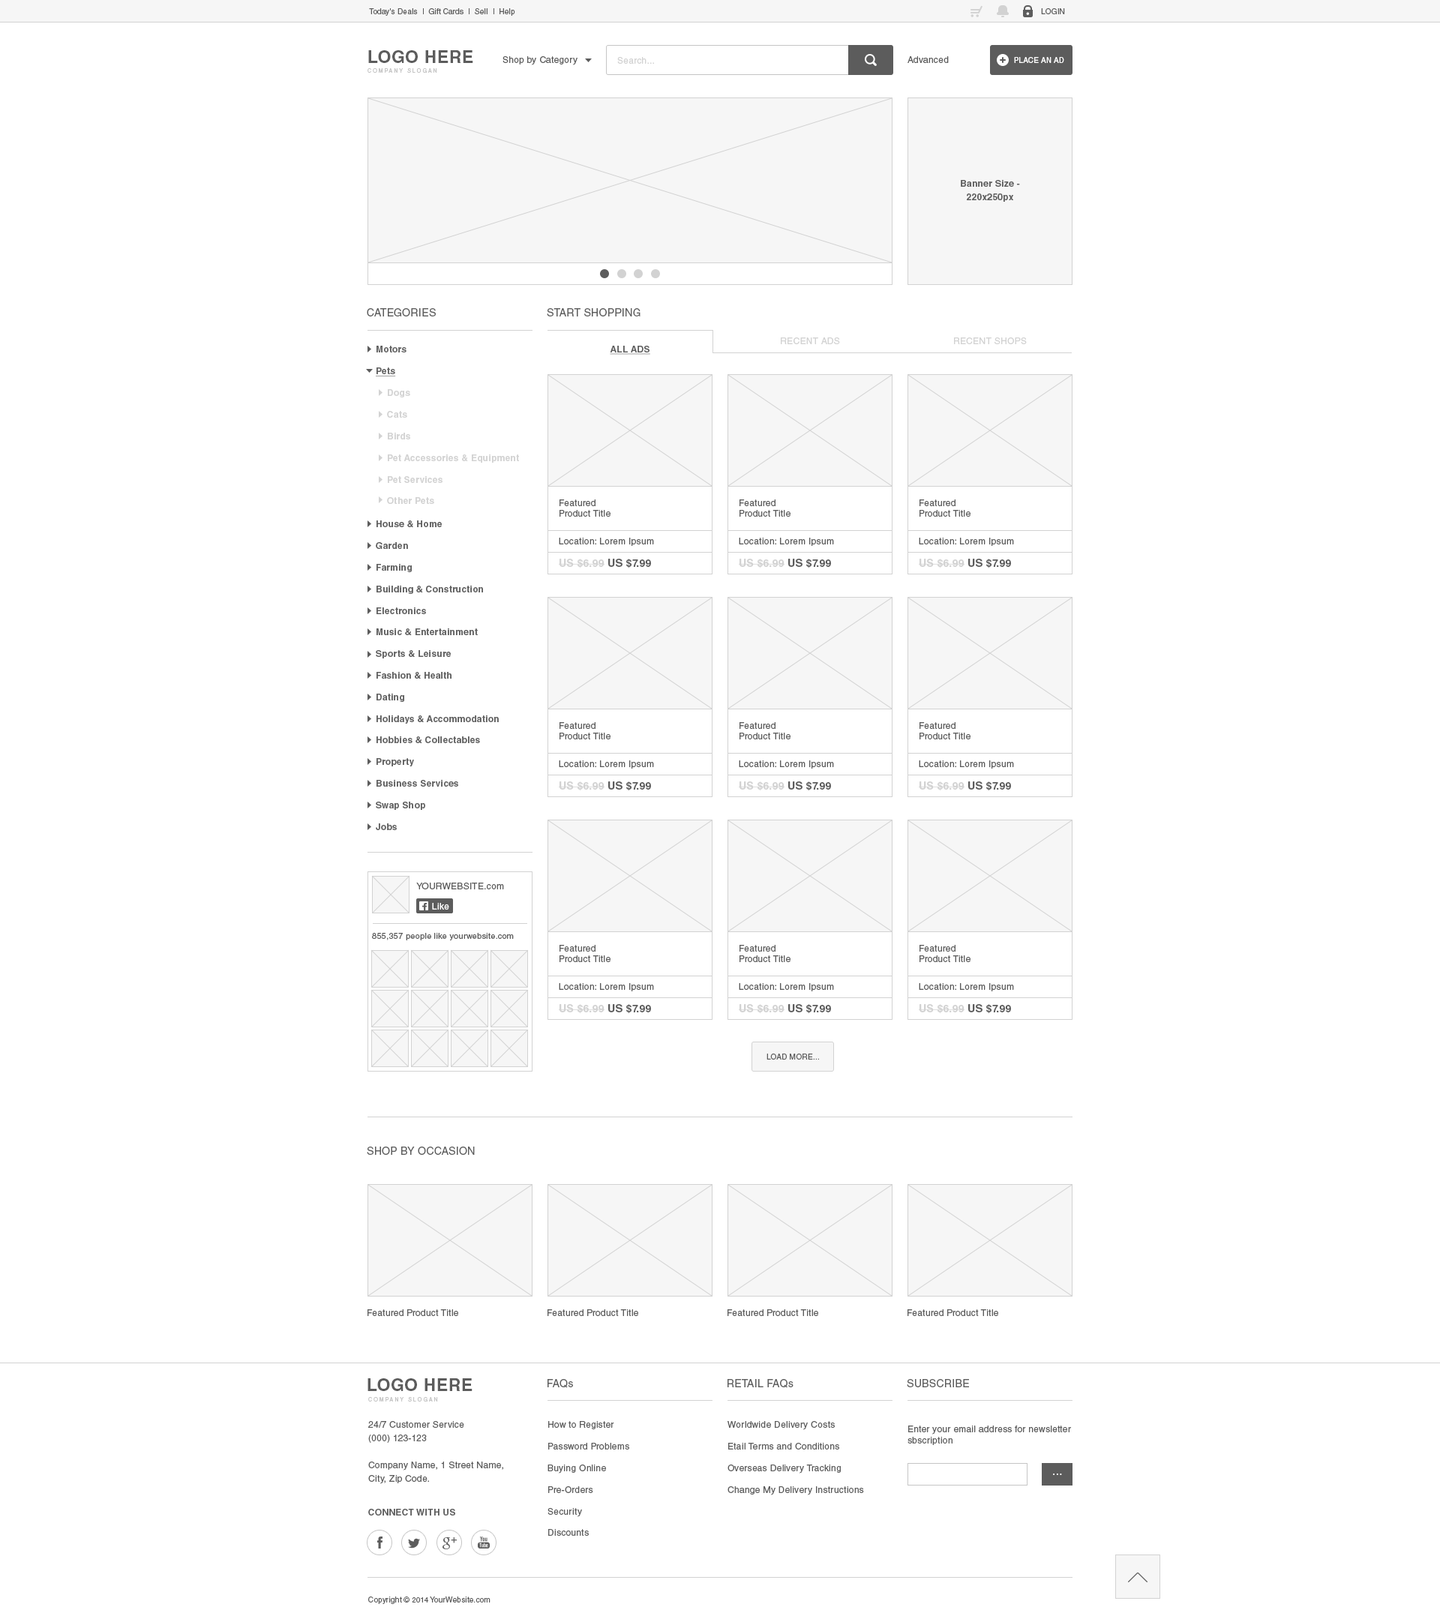
<style>
.page{position:relative;width:1440px;height:1622px;background:#ffffff}
.page>*{position:absolute;margin:0}
.t1{font:7.5px "HelveticaLTStd-Roman";letter-spacing:0.024em;color:#5c5c5c}
.t2{font:7.5px "HelveticaLTStd-Roman";letter-spacing:0.024em;color:#5c5c5c;text-transform:uppercase}
.t3{font:17.2px "HelveticaLTStd-Bold";letter-spacing:0.024em;color:#5c5c5c;text-transform:uppercase}
.t4{font:9px "HelveticaLTStd-Roman";letter-spacing:0.024em;color:#5c5c5c}
.t5{font:9px "HelveticaLTStd-Roman";letter-spacing:0.024em;color:#d2d2d2}
.t6{font:7.5px "HelveticaLTStd-Roman";letter-spacing:0.024em;color:#ffffff;text-transform:uppercase}
.t7{font:5.2px "HelveticaLTStd-Roman";letter-spacing:0.3em;color:#c5c5c5;text-transform:uppercase}
.t8{font:9px/13.5px "HelveticaLTStd-Bold";letter-spacing:0.024em;color:#5c5c5c}
.t9{font:10.5px "HelveticaLTStd-Roman";letter-spacing:0.024em;color:#5c5c5c;text-transform:uppercase}
.t10{font:9px "HelveticaLTStd-Roman";letter-spacing:0.024em;color:#d2d2d2;text-transform:uppercase}
.t11{font:9px "HelveticaLTStd-Bold";letter-spacing:0.024em;color:#5c5c5c}
.t12{font:9px "HelveticaLTStd-Bold";letter-spacing:0.024em;color:#5c5c5c;text-decoration:underline}
.t13{font:9px "HelveticaLTStd-Bold";letter-spacing:0.024em;color:#5c5c5c;text-transform:uppercase;text-decoration:underline}
.t14{font:9px "HelveticaLTStd-Bold";letter-spacing:0.024em;color:#d2d2d2}
.t15{font:10.5px "HelveticaLTStd-Bold";letter-spacing:0.024em;color:#d2d2d2}
.t16{font:10.5px "HelveticaLTStd-Bold";letter-spacing:0.024em;color:#5c5c5c}
.t17{font:9px "HelveticaLTStd-Roman";letter-spacing:0.024em;color:#5c5c5c;text-transform:uppercase}
.t18{font:9px "HelveticaLTStd-Roman";letter-spacing:0.024em;color:#ffffff}
.t19{font:8.2px "HelveticaLTStd-Roman";letter-spacing:0.024em;color:#5c5c5c}
.t20{font:10.5px "HelveticaLTStd-Roman";letter-spacing:0.024em;color:#5c5c5c}
.t21{font:9px/13.5px "HelveticaLTStd-Roman";letter-spacing:0.024em;color:#5c5c5c}
.t22{font:12px "OpenSans";letter-spacing:0.024em;color:#ffffff;text-transform:uppercase}
.t23{font:9px "HelveticaLTStd-Bold";letter-spacing:0.024em;color:#5c5c5c;text-transform:uppercase}
</style>
<div class="page">
<p class="t1" style="left:369px;top:8px;width:146px;height:8px">Today's Deals  |  Gift Cards  |  Sell  |  Help</p>
<p class="t2" style="left:1041px;top:8px;width:24px;height:6px">login</p>
<p class="t3" style="left:368px;top:50px;width:105px;height:13px">Logo Here</p>
<p class="t4" style="left:502px;top:56px;width:76px;height:9px">Shop by Category</p>
<p class="t5" style="left:617px;top:57px;width:37px;height:7px">Search...</p>
<p class="t4" style="left:908px;top:56px;width:41px;height:7px">Advanced</p>
<p class="t6" style="left:1014px;top:57px;width:50px;height:6px">Place an ad</p>
<p class="t7" style="left:368px;top:68px;width:69px;height:5px">Company Slogan</p>
<p class="t8" style="left:961px;top:180px;width:59px;height:22px;text-align:center">Banner Size -<br>220x250px</p>
<p class="t9" style="left:367px;top:308px;width:69px;height:8px">Categories</p>
<p class="t9" style="left:547px;top:308px;width:93px;height:8px">Start shopping</p>
<p class="t10" style="left:781px;top:338px;width:59px;height:6px">Recent Ads</p>
<p class="t10" style="left:954px;top:338px;width:73px;height:6px">Recent Shops</p>
<p class="t11" style="left:376px;top:346px;width:30px;height:30px">Motors<br><br><span class="t12">Pets</span></p>
<p class="t13" style="left:610px;top:346px;width:40px;height:9px">All Ads</p>
<p class="t14" style="left:387px;top:389px;width:132px;height:115px">Dogs<br><br>Cats<br><br>Birds<br><br>Pet Accessories &amp; Equipment<br><br>Pet Services <br><br>Other Pets</p>
<p class="t4" style="left:560px;top:500px;width:50px;height:17px">Featured<br>Product Title</p>
<p class="t4" style="left:740px;top:500px;width:50px;height:17px">Featured<br>Product Title</p>
<p class="t4" style="left:920px;top:500px;width:50px;height:17px">Featured<br>Product Title</p>
<p class="t11" style="left:376px;top:520px;width:123px;height:310px">House &amp; Home<br><br>Garden<br><br>Farming<br><br>Building &amp; Construction<br><br>Electronics<br><br>Music &amp; Entertainment<br><br>Sports &amp; Leisure<br><br>Fashion &amp; Health<br><br>Dating<br><br>Holidays &amp; Accommodation<br><br>Hobbies &amp; Collectables<br><br>Property<br><br>Business Services<br><br>Swap Shop<br><br>Jobs</p>
<p class="t4" style="left:559px;top:538px;width:95px;height:8px">Location: Lorem Ipsum</p>
<p class="t4" style="left:739px;top:538px;width:95px;height:8px">Location: Lorem Ipsum</p>
<p class="t4" style="left:919px;top:538px;width:95px;height:8px">Location: Lorem Ipsum</p>
<p class="t15" style="left:559px;top:559px;width:92px;height:9px">US $6.99 <span class="t16">US $7.99</span></p>
<p class="t15" style="left:739px;top:559px;width:92px;height:9px">US $6.99 <span class="t16">US $7.99</span></p>
<p class="t15" style="left:919px;top:559px;width:92px;height:9px">US $6.99 <span class="t16">US $7.99</span></p>
<p class="t4" style="left:560px;top:722px;width:50px;height:18px">Featured<br>Product Title</p>
<p class="t4" style="left:740px;top:722px;width:50px;height:18px">Featured<br>Product Title</p>
<p class="t4" style="left:920px;top:722px;width:50px;height:18px">Featured<br>Product Title</p>
<p class="t4" style="left:559px;top:760px;width:95px;height:9px">Location: Lorem Ipsum</p>
<p class="t4" style="left:739px;top:760px;width:95px;height:9px">Location: Lorem Ipsum</p>
<p class="t4" style="left:919px;top:760px;width:95px;height:9px">Location: Lorem Ipsum</p>
<p class="t15" style="left:559px;top:782px;width:92px;height:9px">US $6.99 <span class="t16">US $7.99</span></p>
<p class="t15" style="left:739px;top:782px;width:92px;height:9px">US $6.99 <span class="t16">US $7.99</span></p>
<p class="t15" style="left:919px;top:782px;width:92px;height:9px">US $6.99 <span class="t16">US $7.99</span></p>
<p class="t17" style="left:416px;top:883px;width:88px;height:7px">Yourwebsite.<span class="t4">com</span></p>
<p class="t18" style="left:432px;top:903px;width:17px;height:7px">Like</p>
<p class="t19" style="left:372px;top:933px;width:142px;height:7px">855,357 people like yourwebsite.com</p>
<p class="t4" style="left:560px;top:945px;width:50px;height:17px">Featured<br>Product Title</p>
<p class="t4" style="left:740px;top:945px;width:50px;height:17px">Featured<br>Product Title</p>
<p class="t4" style="left:920px;top:945px;width:50px;height:17px">Featured<br>Product Title</p>
<p class="t4" style="left:559px;top:983px;width:95px;height:9px">Location: Lorem Ipsum</p>
<p class="t4" style="left:739px;top:983px;width:95px;height:9px">Location: Lorem Ipsum</p>
<p class="t4" style="left:919px;top:983px;width:95px;height:9px">Location: Lorem Ipsum</p>
<p class="t15" style="left:559px;top:1004px;width:92px;height:10px">US $6.99 <span class="t16">US $7.99</span></p>
<p class="t15" style="left:739px;top:1004px;width:92px;height:10px">US $6.99 <span class="t16">US $7.99</span></p>
<p class="t15" style="left:919px;top:1004px;width:92px;height:10px">US $6.99 <span class="t16">US $7.99</span></p>
<p class="t2" style="left:766px;top:1054px;width:53px;height:6px">lOAD MORE...</p>
<p class="t9" style="left:367px;top:1147px;width:108px;height:8px">Shop by occasion</p>
<p class="t4" style="left:368px;top:1310px;width:90px;height:6px">Featured Product Title</p>
<p class="t4" style="left:548px;top:1310px;width:90px;height:6px">Featured Product Title</p>
<p class="t4" style="left:728px;top:1310px;width:90px;height:6px">Featured Product Title</p>
<p class="t4" style="left:908px;top:1310px;width:90px;height:6px">Featured Product Title</p>
<p class="t3" style="left:368px;top:1378px;width:104px;height:13px">Logo Here</p>
<p class="t9" style="left:548px;top:1379px;width:25px;height:9px">FAQ<span class="t20">s</span></p>
<p class="t9" style="left:728px;top:1379px;width:66px;height:9px">REtail FAQ<span class="t20">s</span></p>
<p class="t9" style="left:907px;top:1379px;width:62px;height:9px">Subscribe</p>
<p class="t7" style="left:368px;top:1397px;width:70px;height:5px">Company Slogan</p>
<p class="t21" style="left:368px;top:1421px;width:135px;height:63px">24/7 Customer Service<br>(000) 123-123<br><br>Company Name, 1 Street Name,<br>City, Zip Code.</p>
<p class="t4" style="left:548px;top:1421px;width:81px;height:115px">How to Register<br><br>Password Problems<br><br>Buying Online<br><br>Pre-Orders<br><br>Security<br><br>Discounts</p>
<p class="t4" style="left:728px;top:1421px;width:136px;height:75px">Worldwide Delivery Costs<br><br>Etail Terms and Conditions<br><br>Overseas Delivery Tracking<br><br>Change My Delivery Instructions</p>
<p class="t4" style="left:908px;top:1426px;width:163px;height:19px">Enter your email address for newsletter sbscription</p>
<p class="t22" style="left:1053px;top:1474px;width:9px;height:1px">...</p>
<p class="t23" style="left:368px;top:1509px;width:87px;height:7px">Connect with Us</p>
<p class="t1" style="left:368px;top:1597px;width:122px;height:7px">Copyright © 2014 YourWebsite.com</p>
</div>
